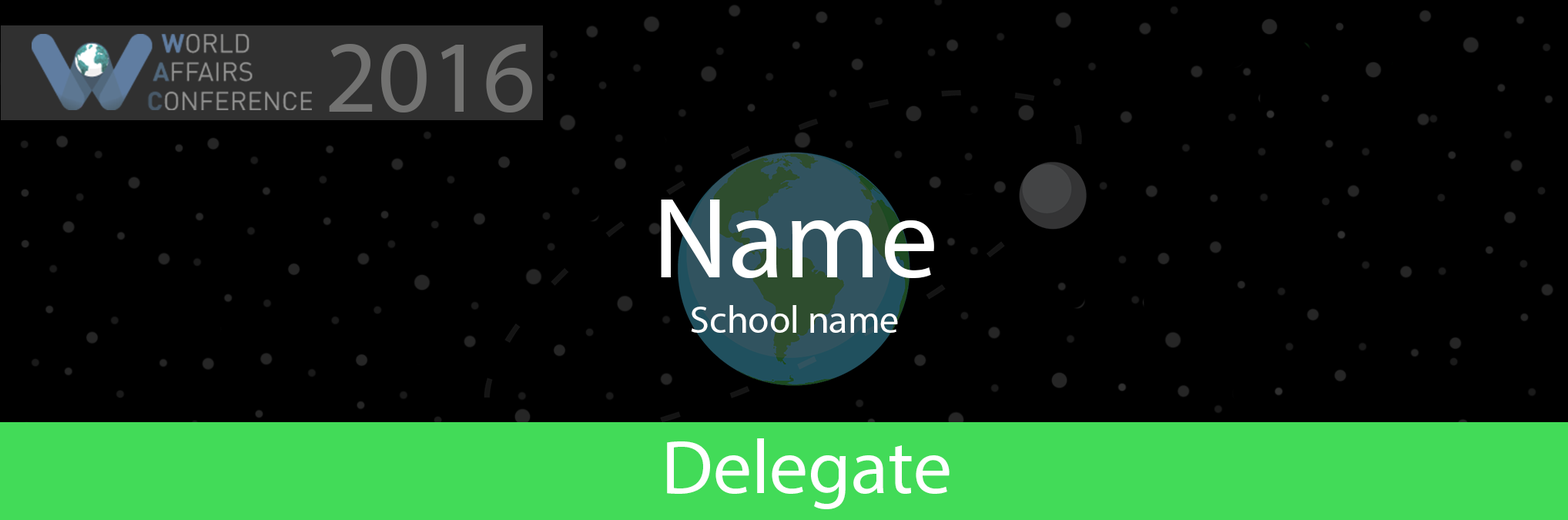
<style>
.page{position:relative;width:1568px;height:520px;background:#000000}
.page>*{position:absolute;margin:0}
.t1{font:102.7px "MyriadPro-Regular";color:#727271}
.t2{font:115.5px "MyriadPro-Regular";color:#ffffff}
.t3{font:38.5px "MyriadPro-Regular";color:#ffffff}
.t4{font:77px "MyriadPro-Regular";color:#ffffff}
</style>
<div class="page">
<p class="t1" style="left:329px;top:43px;width:203px;height:69px">2016</p>
<p class="t2" style="left:661px;top:199px;width:273px;height:79px">Name</p>
<p class="t3" style="left:691px;top:305px;width:207px;height:28px">School name</p>
<p class="t4" style="left:667px;top:438px;width:283px;height:71px">Delegate</p>
</div>
